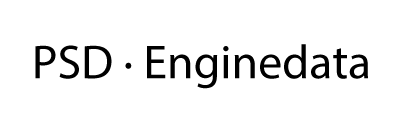
<style>
.page{position:relative;width:406px;height:120px;background:#ffffff}
.page>*{position:absolute;margin:0}
.t1{font:48px "MyriadPro-Regular";color:#000000}
</style>
<div class="page">
<p class="t1" style="left:35px;top:44px;width:333px;height:45px">PSD · Enginedata</p>
</div>
